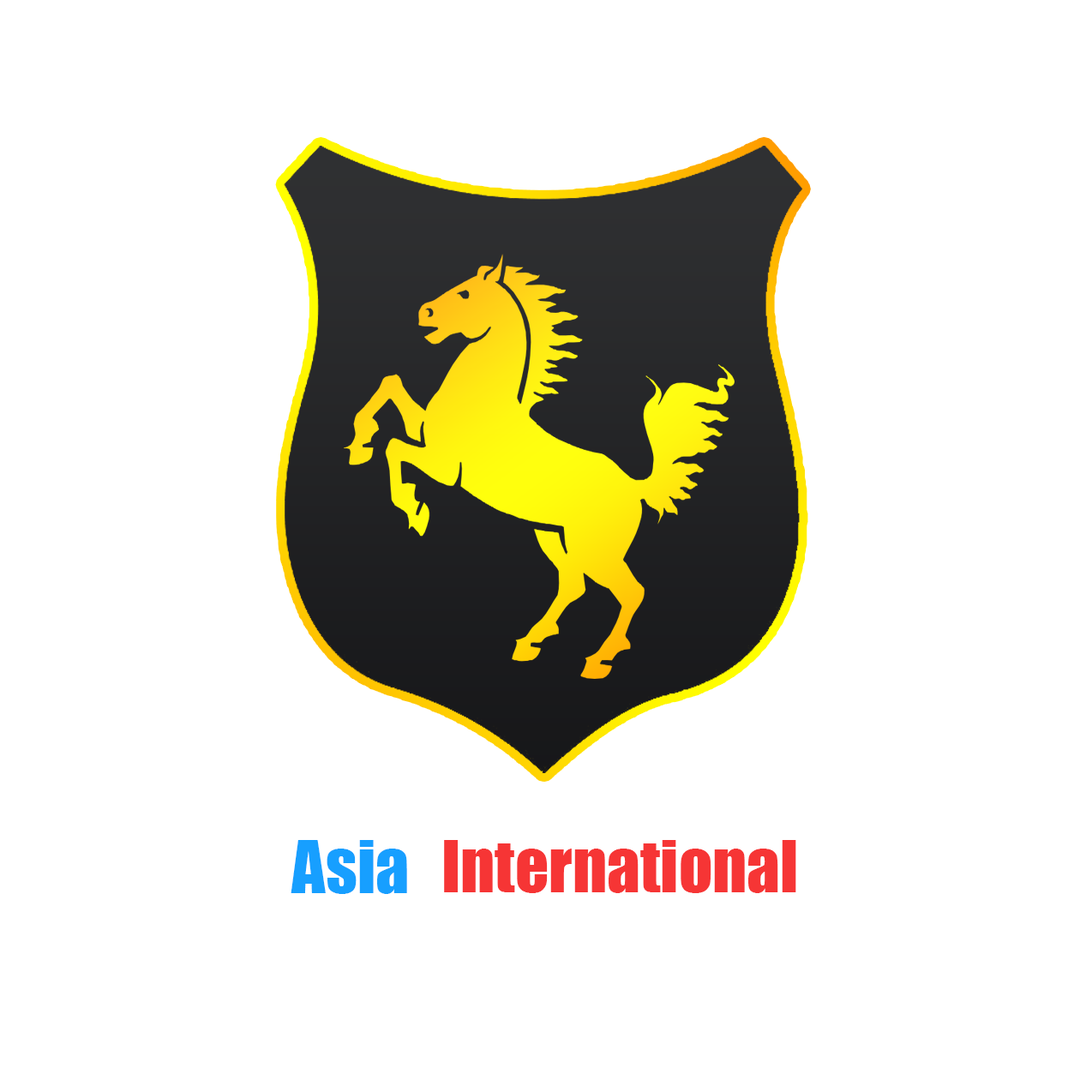
<style>
.page{position:relative;width:1092px;height:1092px;background:#ffffff}
.page>*{position:absolute;margin:0}
.t1{font:67.2px "Impact";color:#179fff}
.t2{font:66px "Impact";color:#f63535}
</style>
<div class="page">
<p class="t1" style="left:291px;top:840px;width:116px;height:54px">Asia</p>
<p class="t2" style="left:444px;top:840px;width:352px;height:53px">International</p>
</div>
